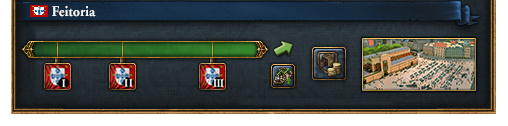
<style>
.page{position:relative;width:508px;height:126px}
.page>*{position:absolute;margin:0}
.t1{font:14.7px "AGaramond-Bold";letter-spacing:-0.004em;color:#ffffff;scale:0.94 1}
</style>
<div class="page">
<p class="t1" style="left:52px;top:6px;width:44px;height:11px">Feitoria</p>
</div>
